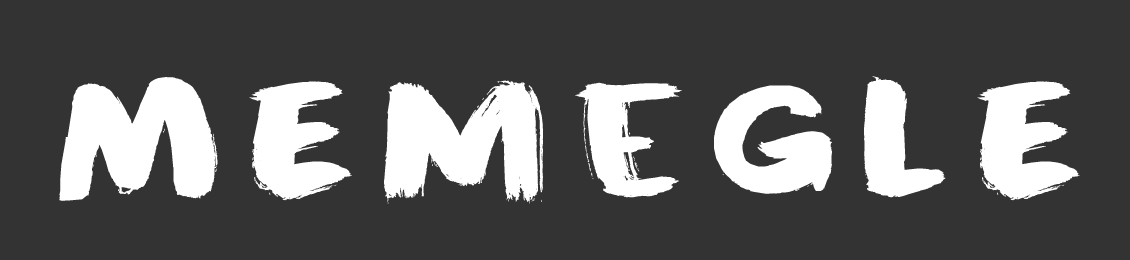
<style>
.page{position:relative;width:1130px;height:260px;background:#333333}
.page>*{position:absolute;margin:0}
.t1{font:145.7px "DKCinnabarBrush";letter-spacing:0.1em;color:#ffffff;scale:1.38 1}
</style>
<div class="page">
<p class="t1" style="left:59px;top:76px;width:1021px;height:128px">MEmegLE</p>
</div>
